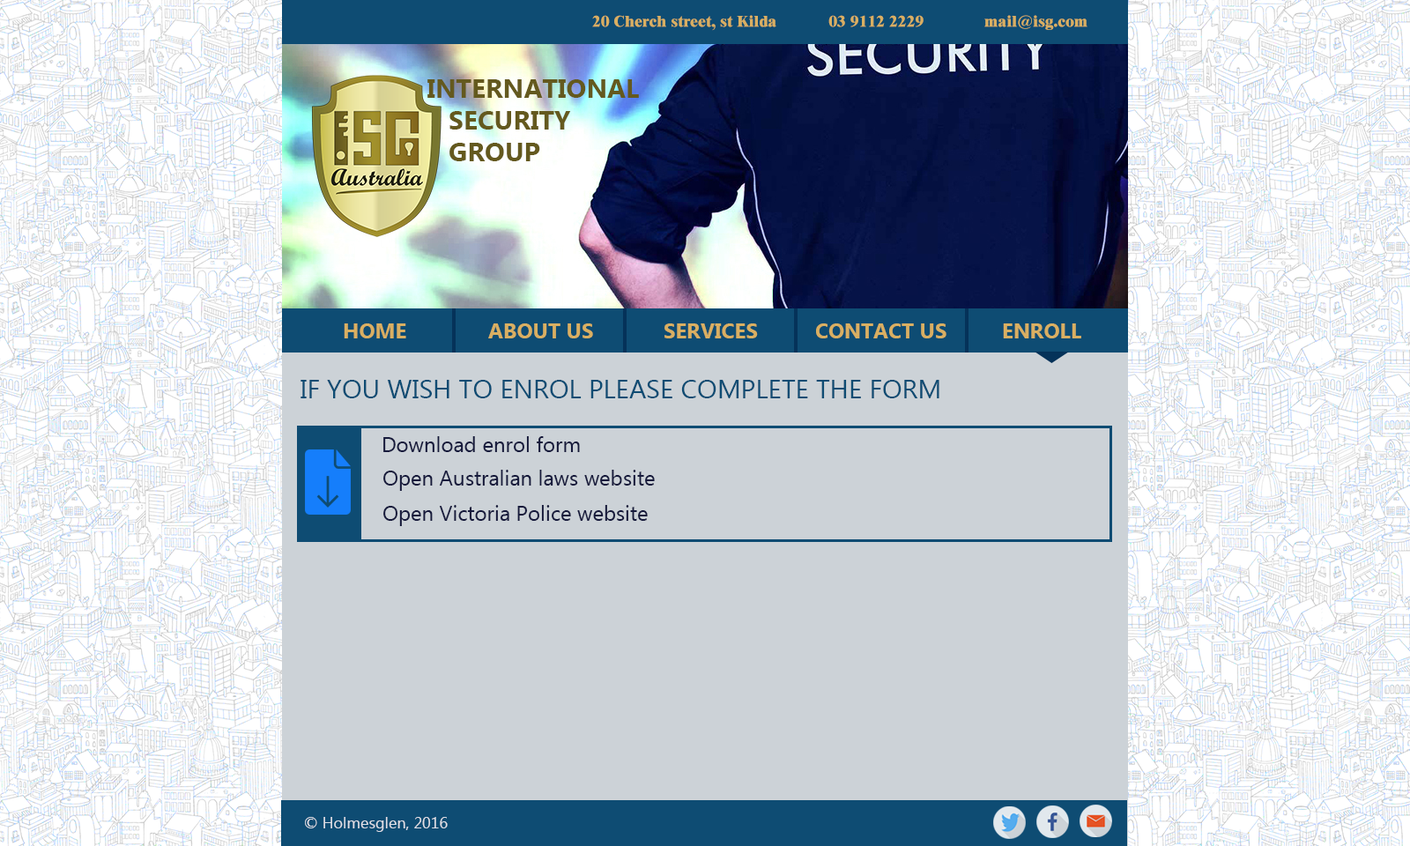
<style>
.page{position:relative;width:1410px;height:846px;background:#ccd2d7}
.page>*{position:absolute;margin:0}
.t1{font:15.9px "Dutch801BT-ExtraBold";color:#d9af62}
.t2{font:26.4px "Ebrima-Bold";color:#64591e}
.t3{font:26.4px "Ebrima-Bold";color:#ffffff}
.t4{font:21.1px "Ebrima-Bold";color:#d9af62}
.t5{font:26.4px "Ebrima";color:#0e4c73}
.t6{font:21.1px "Ebrima";color:#161a3c}
.t7{font:15.9px "Ebrima";color:#dfe0e7}
</style>
<div class="page">
<p class="t1" style="left:592px;top:15px;width:495px;height:16px">20 Cherch street, st Kilda            03 9112 2229              mail@isg.com</p>
<p class="t2" style="left:427px;top:79px;width:212px;height:82px">INTERNATIONAL<br>   SECURITY<br>   GROUP<span class="t3">P</span></p>
<p class="t4" style="left:344px;top:323px;width:62px;height:15px">HOME</p>
<p class="t4" style="left:488px;top:323px;width:105px;height:15px">ABOUT US</p>
<p class="t4" style="left:664px;top:323px;width:94px;height:15px">SERVICES</p>
<p class="t4" style="left:816px;top:323px;width:130px;height:15px">CONTACT US</p>
<p class="t4" style="left:1003px;top:323px;width:78px;height:15px">ENROLL</p>
<p class="t5" style="left:300px;top:380px;width:639px;height:18px">IF YOU WISH TO ENROL PLEASE COMPLETE THE FORM</p>
<p class="t6" style="left:383px;top:436px;width:197px;height:16px">Download enrol form</p>
<p class="t6" style="left:383px;top:470px;width:272px;height:21px">Open Australian laws website</p>
<p class="t6" style="left:383px;top:505px;width:265px;height:21px">Open Victoria Police website</p>
<p class="t7" style="left:305px;top:817px;width:143px;height:15px">© Holmesglen, 2016</p>
</div>
